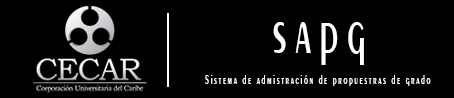
<style>
.page{position:relative;width:454px;height:98px;background:#000000}
.page>*{position:absolute;margin:0}
.t1{font:70.5px "Exotic350BT-DemiBold";letter-spacing:0.2em;color:#ffffff;scale:0.57 1}
.t2{font:14.1px "Exotic350BT-DemiBold";letter-spacing:0.2em;color:#ffffff;scale:0.57 1}
</style>
<div class="page">
<p class="t1" style="left:273px;top:22px;width:91px;height:43px">sapg</p>
<p class="t2" style="left:205px;top:75px;width:226px;height:11px">Sistema de admistración de propuestras de grado</p>
</div>
